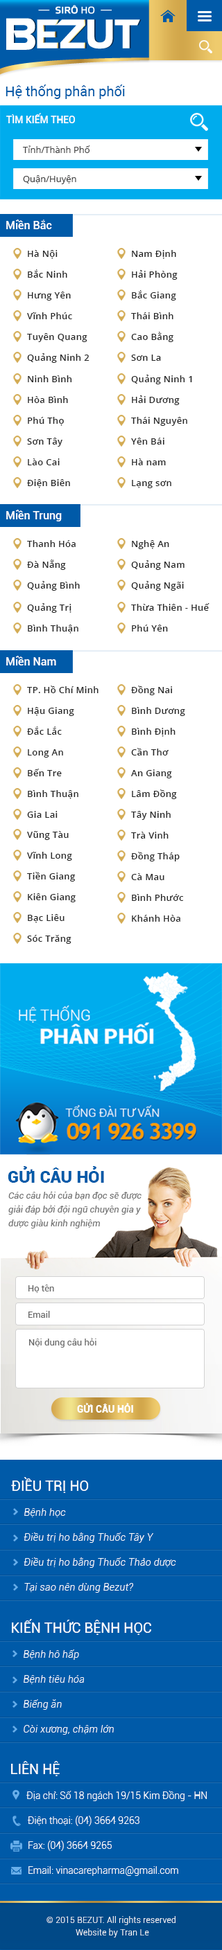
<style>
.page{position:relative;width:222px;height:1950px;background:#ffffff}
.page>*{position:absolute;margin:0}
.t1{font:13.8px "Roboto-Regular";color:#005aa8}
.t2{font:9.7px "Roboto-Medium";color:#ffffff;text-transform:uppercase}
.t3{font:9px "OpenSans";color:#414141}
.t4{font:11.1px "Roboto-Medium";color:#ffffff}
.t5{font:9px/20.8px "OpenSans-Semibold";letter-spacing:0.025em;color:#282828}
.t6{font:16.6px "Roboto-Black";color:#005aa8;text-transform:uppercase}
.t7{font:9px/13.8px "Roboto-Italic";color:#747474}
.t8{font:9px "Roboto-Regular";color:#686868}
.t9{font:9.7px "Roboto-Black";color:#ffffff;text-transform:uppercase}
.t10{font:9.7px/24.9px "Roboto-LightItalic";letter-spacing:0.025em;color:#ffffff}
.t11{font:12.5px/18px "Roboto-Regular";color:#1ed107;text-transform:uppercase}
.t12{font:13.8px/18px "Roboto-Regular";color:#ffffff;text-transform:uppercase}
.t13{font:9.7px/20.8px "Roboto-LightItalic";letter-spacing:0.025em;color:#ffffff}
.t14{font:9.7px/18px "Roboto-Light";color:#ffffff}
.t15{font:9.7px/24.9px "Roboto-Light";color:#ffffff}
.t16{font:9.7px/20.8px "Roboto-Light";color:#ffffff}
.t17{font:8.3px/12.5px "Roboto-Light";letter-spacing:0.025em;color:#ffffff}
</style>
<div class="page">
<p class="t1" style="left:6px;top:84px;width:119px;height:15px">Hệ thống phân phối</p>
<p class="t2" style="left:6px;top:113px;width:69px;height:10px">Tìm kiếm theo</p>
<p class="t3" style="left:23px;top:145px;width:67px;height:8px">Tỉnh/Thành Phố</p>
<p class="t3" style="left:23px;top:175px;width:53px;height:9px">Quận/Huyện</p>
<p class="t4" style="left:6px;top:219px;width:46px;height:10px">Miền Bắc</p>
<p class="t5" style="left:27px;top:250px;width:62px;height:113px;text-align:justify">Hà Nội<br>Bắc Ninh<br>Hưng Yên<br>Vĩnh Phúc<br>Tuyên Quang<br>Quảng Ninh 2</p>
<p class="t5" style="left:131px;top:250px;width:46px;height:111px;text-align:justify">Nam Định<br>Hải Phòng<br>Bắc Giang<br>Thái Bình<br>Cao Bằng<br>Sơn La</p>
<p class="t5" style="left:27px;top:375px;width:45px;height:113px;text-align:justify">Ninh Bình<br>Hòa Bình<br>Phú Thọ<br>Sơn Tây<br>Lào Cai<br>Điện Biên</p>
<p class="t5" style="left:131px;top:375px;width:61px;height:113px;text-align:justify">Quảng Ninh 1<br>Hải Dương<br>Thái Nguyên<br>Yên Bái<br>Hà nam<br>Lạng sơn</p>
<p class="t4" style="left:6px;top:510px;width:56px;height:11px">Miền Trung</p>
<p class="t5" style="left:27px;top:540px;width:53px;height:51px;text-align:justify">Thanh Hóa<br>Đà Nẵng<br>Quảng Bình</p>
<p class="t5" style="left:131px;top:540px;width:53px;height:51px;text-align:justify">Nghệ An<br>Quảng Nam<br>Quảng Ngãi</p>
<p class="t5" style="left:27px;top:603px;width:51px;height:30px;text-align:justify">Quảng Trị<br>Bình Thuận</p>
<p class="t5" style="left:131px;top:603px;width:78px;height:28px;text-align:justify">Thừa Thiên - Huế<br>Phú Yên</p>
<p class="t4" style="left:6px;top:656px;width:50px;height:9px">Miền Nam</p>
<p class="t5" style="left:27px;top:685px;width:71px;height:133px;text-align:justify">TP. Hồ Chí Minh<br>Hậu Giang<br>Đắc Lắc<br>Long An<br>Bến Tre<br>Bình Thuận<br>Gia Lai</p>
<p class="t5" style="left:131px;top:685px;width:54px;height:114px;text-align:justify">Đồng Nai<br>Bình Dương<br>Bình Định<br>Cần Thơ<br>An Giang<br>Lâm Đồng</p>
<p class="t5" style="left:131px;top:811px;width:52px;height:110px;text-align:justify">Tây Ninh<br>Trà Vinh<br>Đồng Tháp<br>Cà Mau<br>Bình Phước<br>Khánh Hòa</p>
<p class="t5" style="left:27px;top:831px;width:48px;height:113px;text-align:justify">Vũng Tàu<br>Vĩnh Long<br>Tiền Giang<br>Kiên Giang<br>Bạc Liêu<br>Sóc Trăng</p>
<p class="t6" style="left:8px;top:1166px;width:96px;height:16px">Gửi câu hỏi</p>
<p class="t7" style="left:8px;top:1191px;width:133px;height:37px">Các câu hỏi của bạn đọc sẽ được giải đáp bởi đội ngũ chuyên gia y dược giàu kinh nghiệm</p>
<p class="t8" style="left:28px;top:1284px;width:26px;height:9px">Họ tên</p>
<p class="t8" style="left:28px;top:1311px;width:22px;height:6px">Email</p>
<p class="t8" style="left:29px;top:1338px;width:67px;height:9px">Nội dung câu hỏi</p>
<p class="t9" style="left:77px;top:1403px;width:56px;height:9px">Gửi câu hỏi</p>
<p class="t10" style="left:11px;top:1477px;width:165px;height:115px;text-align:justify"><span class="t11">    </span><span class="t12">điều trị ho<br> </span>Bệnh <span class="t13">học<br> </span>Điều trị ho bằng Thuốc Tây Y<br> Điều trị ho bằng Thuốc Thảo dược<br> Tại sao nên dùng Bezut?</p>
<p class="t10" style="left:12px;top:1619px;width:139px;height:115px;text-align:justify"><span class="t11">    </span><span class="t12">kiến thức bệnh học<br> </span>Bệnh <span class="t13">hô hấp<br> </span>Bệnh tiêu hóa<br> Biếng ăn<br> Còi xương, chậm lớn</p>
<p class="t14" style="left:11px;top:1761px;width:195px;height:114px;text-align:justify"><span class="t11">    </span><span class="t12">liên hệ<br>   </span><span class="t15">Địa c</span><span class="t16">hỉ: Số 18 ngách 19/15 Kim Đồng - HN<br>   </span><span class="t15">Điện thoại: (04) 3664 9263<br>   </span>Fax: (04) 3664 9265<br>   Email: vinacarepharma@gmail.com</p>
<p class="t17" style="left:46px;top:1916px;width:129px;height:21px;text-align:center">© 2015 BEZUT. All rights reserved <br>Website by Tran Le</p>
</div>
